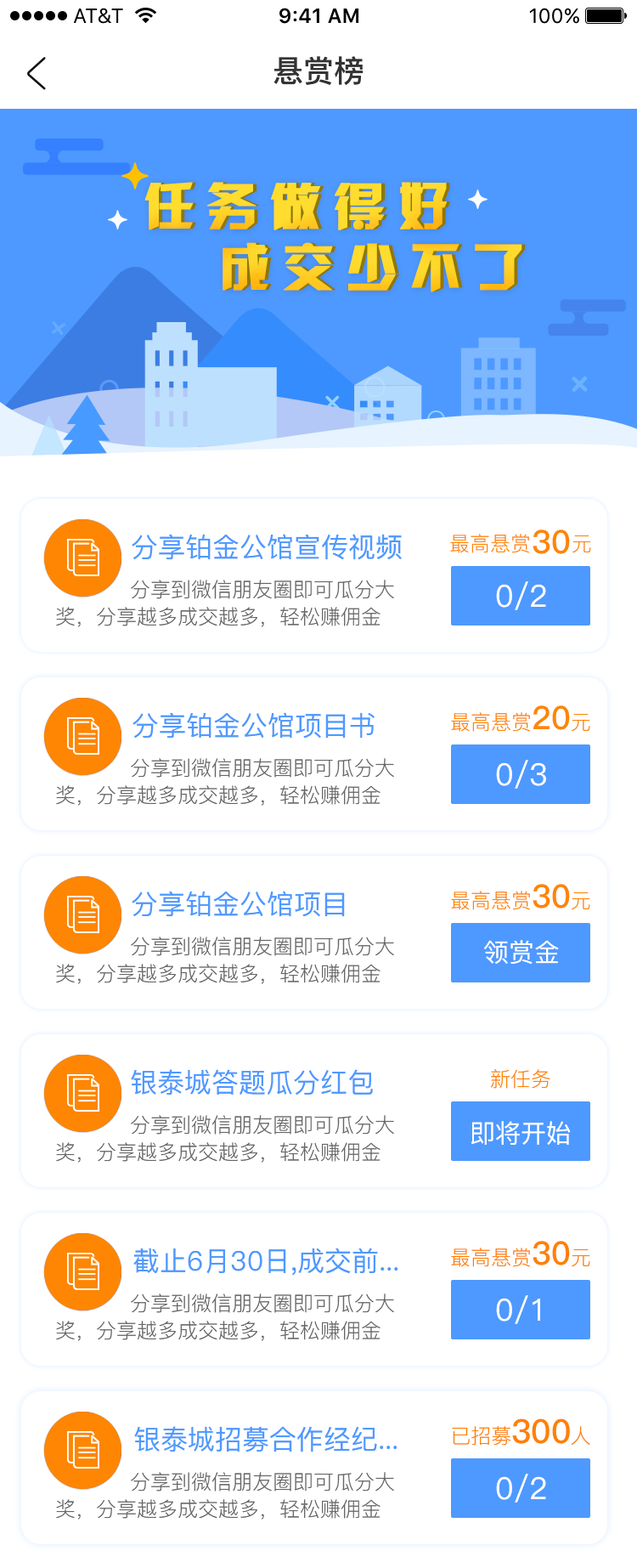
<style>
.page{position:relative;width:637px;height:1568px;background:#ffffff}
.page>*{position:absolute;margin:0}
.t1{font:30.6px "PingFang-SC-Bold";color:#333333}
.t2{font:51px/30.6px "HYk2gj";letter-spacing:0.22em;color:#ffdd2f;font-weight:bold}
.t3{font:51px/30.6px "HYk2gj";letter-spacing:0.22em;color:#ffd127;font-weight:bold}
.t4{font:27.2px "PingFang-SC-Medium";color:#4e99ff}
.t5{font:20.4px "PingFang-SC-Regular";color:#fe8602}
.t6{font:32.3px "PingFang-SC-Bold";color:#fe8602}
.t7{font:20.4px/27.2px "PingFang-SC-Regular";color:#666666}
.t8{font:30.6px "PingFang-SC-Medium";color:#ffffff}
.t9{font:20.4px "PingFang-SC-Regular";color:#fe8500}
.t10{font:32.3px "PingFang-SC-Bold";color:#fe8500}
.t11{font:25.5px "PingFang-SC-Medium";color:#ffffff}
.t12{font:20.4px "PingFang-SC-Regular";color:#ff8000}
.t13{font:32.3px "PingFang-SC-Bold";color:#ff8000}
.t14{font:33.1px "PingFang-SC-Bold";color:#ff8000}
</style>
<div class="page">
<p class="t1" style="left:274px;top:56px;width:90px;height:29px">悬赏榜</p>
<p class="t2" style="left:144px;top:182px;width:379px;height:110px">任务做得好 <br><br>  成交少不了</p>
<p class="t3" style="left:148px;top:182px;width:378px;height:110px">任务做得好 <br><br>  成交少不了</p>
<p class="t4" style="left:132px;top:534px;width:270px;height:26px">分享铂金公馆宣传视频</p>
<p class="t5" style="left:450px;top:534px;width:142px;height:19px">最高悬赏      元</p>
<p class="t6" style="left:533px;top:529px;width:37px;height:25px">30</p>
<p class="t7" style="left:56px;top:580px;width:338px;height:47px">分享到微信朋友圈即可瓜分大<br>奖，分享越多成交越多，轻松赚佣金</p>
<p class="t8" style="left:496px;top:581px;width:50px;height:29px">0/2</p>
<p class="t4" style="left:133px;top:712px;width:242px;height:27px">分享铂金公馆项目书</p>
<p class="t5" style="left:451px;top:705px;width:140px;height:27px">最高悬赏<span class="t6">20</span>元</p>
<p class="t7" style="left:56px;top:758px;width:338px;height:48px">分享到微信朋友圈即可瓜分大<br>奖，分享越多成交越多，轻松赚佣金</p>
<p class="t8" style="left:496px;top:760px;width:50px;height:29px">0/3</p>
<p class="t4" style="left:132px;top:891px;width:213px;height:26px">分享铂金公馆项目</p>
<p class="t9" style="left:451px;top:884px;width:140px;height:26px">最高悬赏<span class="t10">30</span>元</p>
<p class="t7" style="left:56px;top:937px;width:338px;height:47px">分享到微信朋友圈即可瓜分大<br>奖，分享越多成交越多，轻松赚佣金</p>
<p class="t11" style="left:484px;top:940px;width:75px;height:25px">领赏金</p>
<p class="t4" style="left:131px;top:1069px;width:242px;height:26px">银泰城答题瓜分红包</p>
<p class="t9" style="left:491px;top:1069px;width:60px;height:20px">新任务</p>
<p class="t7" style="left:56px;top:1115px;width:338px;height:48px">分享到微信朋友圈即可瓜分大<br>奖，分享越多成交越多，轻松赚佣金</p>
<p class="t11" style="left:472px;top:1121px;width:99px;height:24px">即将开始</p>
<p class="t12" style="left:451px;top:1241px;width:140px;height:26px">最高悬赏<span class="t13">30</span>元</p>
<p class="t4" style="left:133px;top:1248px;width:266px;height:28px">截止6月30日,成交前...</p>
<p class="t7" style="left:56px;top:1293px;width:338px;height:48px">分享到微信朋友圈即可瓜分大<br>奖，分享越多成交越多，轻松赚佣金</p>
<p class="t8" style="left:496px;top:1295px;width:45px;height:29px">0/1</p>
<p class="t12" style="left:452px;top:1418px;width:139px;height:28px">已招募<span class="t14">300</span>人</p>
<p class="t4" style="left:134px;top:1426px;width:264px;height:26px">银泰城招募合作经纪...</p>
<p class="t7" style="left:56px;top:1472px;width:338px;height:48px">分享到微信朋友圈即可瓜分大<br>奖，分享越多成交越多，轻松赚佣金</p>
<p class="t8" style="left:496px;top:1474px;width:50px;height:29px">0/2</p>
</div>
